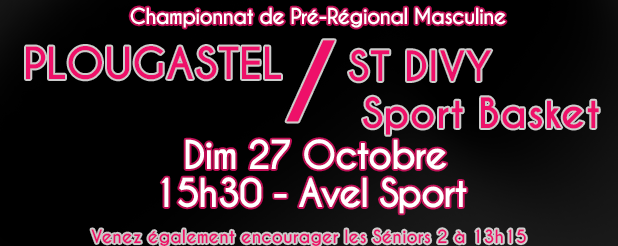
<style>
.page{position:relative;width:618px;height:246px;background:#000000}
.page>*{position:absolute;margin:0}
.t1{font:20.8px "CaviarDreams-Bold";letter-spacing:-0.05em;color:#ffffff}
.t2{font:104.2px "CaviarDreams-Bold";color:#ee1069}
.t3{font:41.7px "CaviarDreams-Bold";color:#ee1069}
.t4{font:39.6px/46.9px "CaviarDreams-Bold";color:#ee1069}
.t5{font:37.5px/37.5px "CaviarDreams-Bold";letter-spacing:-0.05em;color:#ffffff}
.t6{font:17.2px "CaviarDreams-Bold";color:#ee1069}
</style>
<div class="page">
<p class="t1" style="left:130px;top:7px;width:376px;height:21px">Championnat de Pré-Régional Masculine</p>
<p class="t2" style="left:286px;top:40px;width:49px;height:82px">/</p>
<p class="t3" style="left:26px;top:46px;width:255px;height:34px">PLOUGASTEL</p>
<p class="t4" style="left:349px;top:49px;width:250px;height:86px;text-align:center">ST DIVY <br>      Sport Basket</p>
<p class="t5" style="left:161px;top:139px;width:306px;height:75px;text-align:center">Dim 27 Octobre <br>15h30 - Avel Sport</p>
<p class="t6" style="left:91px;top:229px;width:435px;height:18px">Venez également encourager les Séniors 2 à 13h15</p>
</div>
